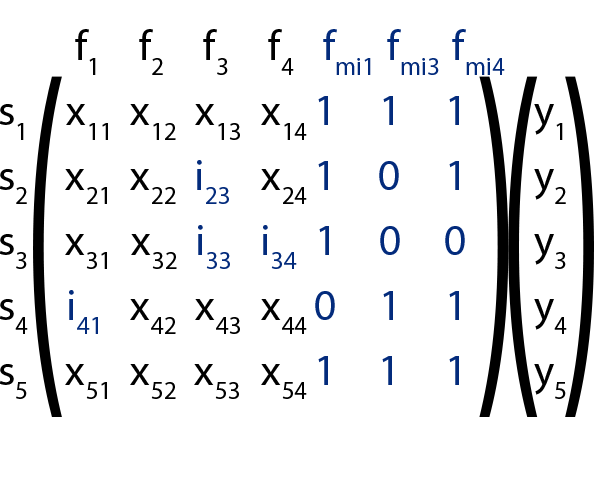
<style>
.page{position:relative;width:612px;height:480px;background:#ffffff}
.page>*{position:absolute;margin:0}
.t1{font:43.2px "MyriadPro-Regular";color:#000000}
.t2{font:43.2px "MyriadPro-Regular";color:#000000;font-variant:small-caps}
.t3{font:43.2px "MyriadPro-Regular";color:#032b7c}
.t4{font:43.2px "MyriadPro-Regular";color:#032b7c;font-variant:small-caps}
</style>
<div class="page">
<p class="t1" style="left:75px;top:29px;width:21px;height:46px">f<span class="t2">1</span></p>
<p class="t1" style="left:139px;top:29px;width:24px;height:46px">f2</p>
<p class="t1" style="left:203px;top:29px;width:25px;height:46px">f<span class="t2">3</span></p>
<p class="t1" style="left:268px;top:29px;width:26px;height:46px">f<span class="t2">4</span></p>
<p class="t3" style="left:323px;top:29px;width:48px;height:46px">fmi1</p>
<p class="t3" style="left:387px;top:29px;width:52px;height:46px">fmi<span class="t4">3</span></p>
<p class="t3" style="left:452px;top:29px;width:53px;height:46px">fmi4</p>
<p class="t3" style="left:318px;top:96px;width:10px;height:29px">1</p>
<p class="t3" style="left:383px;top:96px;width:10px;height:29px">1</p>
<p class="t3" style="left:449px;top:96px;width:10px;height:29px">1</p>
<p class="t1" style="left:0px;top:104px;width:24px;height:36px">s<span class="t2">1</span></p>
<p class="t2" style="left:66px;top:104px;width:42px;height:36px"><span class="t1">x</span>11</p>
<p class="t2" style="left:130px;top:104px;width:46px;height:36px"><span class="t1">x</span>12</p>
<p class="t2" style="left:195px;top:104px;width:45px;height:36px"><span class="t1">x</span>13</p>
<p class="t2" style="left:261px;top:104px;width:46px;height:36px"><span class="t1">x</span>14</p>
<p class="t1" style="left:534px;top:104px;width:29px;height:36px">y<span class="t2">1</span></p>
<p class="t3" style="left:197px;top:160px;width:32px;height:44px">i23</p>
<p class="t3" style="left:318px;top:161px;width:10px;height:29px">1</p>
<p class="t3" style="left:379px;top:161px;width:20px;height:29px">0</p>
<p class="t3" style="left:449px;top:161px;width:10px;height:29px">1</p>
<p class="t1" style="left:0px;top:169px;width:27px;height:35px">s<span class="t2">2</span></p>
<p class="t2" style="left:65px;top:169px;width:42px;height:35px"><span class="t1">x</span>21</p>
<p class="t2" style="left:130px;top:169px;width:46px;height:35px"><span class="t1">x</span>22</p>
<p class="t2" style="left:261px;top:169px;width:46px;height:35px"><span class="t1">x</span>24</p>
<p class="t1" style="left:534px;top:169px;width:32px;height:35px">y<span class="t2">2</span></p>
<p class="t3" style="left:198px;top:225px;width:32px;height:44px">i33</p>
<p class="t3" style="left:263px;top:225px;width:34px;height:44px">i34</p>
<p class="t3" style="left:319px;top:226px;width:10px;height:29px">1</p>
<p class="t3" style="left:380px;top:226px;width:20px;height:29px">0</p>
<p class="t3" style="left:445px;top:226px;width:20px;height:29px">0</p>
<p class="t1" style="left:0px;top:234px;width:27px;height:35px">s<span class="t2">3</span></p>
<p class="t2" style="left:65px;top:234px;width:42px;height:35px"><span class="t1">x</span>31</p>
<p class="t2" style="left:131px;top:234px;width:46px;height:35px"><span class="t1">x</span>32</p>
<p class="t1" style="left:534px;top:234px;width:32px;height:35px">y<span class="t2">3</span></p>
<p class="t3" style="left:69px;top:290px;width:29px;height:44px">i41</p>
<p class="t3" style="left:315px;top:291px;width:20px;height:29px">0</p>
<p class="t3" style="left:383px;top:291px;width:10px;height:29px">1</p>
<p class="t3" style="left:449px;top:291px;width:10px;height:29px">1</p>
<p class="t1" style="left:0px;top:299px;width:28px;height:35px">s<span class="t2">4</span></p>
<p class="t2" style="left:130px;top:299px;width:46px;height:35px"><span class="t1">x</span>42</p>
<p class="t2" style="left:195px;top:299px;width:45px;height:35px"><span class="t1">x</span>43</p>
<p class="t2" style="left:261px;top:299px;width:46px;height:35px"><span class="t1">x</span>44</p>
<p class="t1" style="left:534px;top:299px;width:33px;height:35px">y<span class="t2">4</span></p>
<p class="t1" style="left:0px;top:364px;width:27px;height:35px">s5</p>
<p class="t2" style="left:65px;top:364px;width:42px;height:35px"><span class="t1">x</span>51</p>
<p class="t2" style="left:130px;top:364px;width:46px;height:35px"><span class="t1">x</span>52</p>
<p class="t2" style="left:194px;top:364px;width:45px;height:35px"><span class="t1">x</span>53</p>
<p class="t2" style="left:261px;top:364px;width:46px;height:35px"><span class="t1">x</span>54</p>
<p class="t3" style="left:318px;top:356px;width:10px;height:29px">1</p>
<p class="t3" style="left:382px;top:356px;width:10px;height:29px">1</p>
<p class="t3" style="left:449px;top:356px;width:10px;height:29px">1</p>
<p class="t1" style="left:534px;top:364px;width:32px;height:35px">y<span class="t2">5</span></p>
</div>
